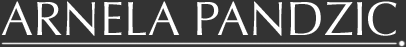
<style>
.page{position:relative;width:406px;height:47px;background:#333333}
.page>*{position:absolute;margin:0}
.t1{font:48px "Optima-Regular";color:#ffffff}
</style>
<div class="page">
<p class="t1" style="left:1px;top:1px;width:396px;height:35px">ARNELA PANDZIC</p>
</div>
